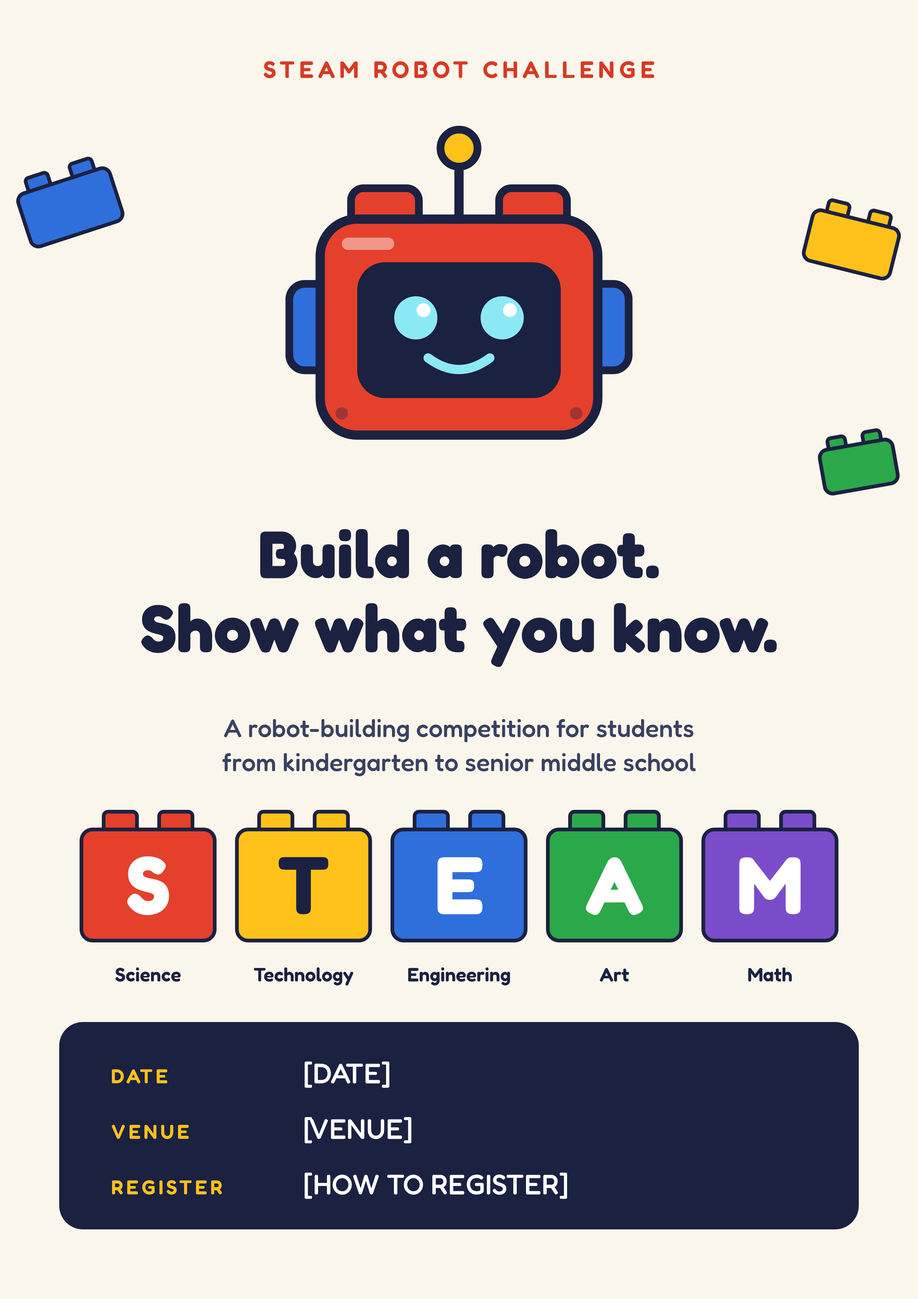
<style>
.page{position:relative;width:918px;height:1299px;background:#fbf6ec}
.page>*{position:absolute;margin:0}
.t1{font:23.7px "Fredoka-SemiBold";letter-spacing:0.188em;color:#d63a25}
.t2{font:66.6px/74px "Fredoka-Bold";color:#1b2140}
.t3{font:25.2px/34.1px "Fredoka-Medium";color:#3a4160}
.t4{font:81.4px "Fredoka-Bold";color:#ffffff}
.t5{font:81.4px "Fredoka-Bold";color:#1b2140}
.t6{font:19.3px "Fredoka-SemiBold";color:#1b2140}
.t7{font:28.1px "Fredoka-Medium";color:#ffffff}
.t8{font:20px "Fredoka-SemiBold";letter-spacing:0.148em;color:#ffc21a}
</style>
<div class="page">
<p class="t1" style="left:264px;top:61px;width:391px;height:17px">STEAM ROBOT CHALLENGE</p>
<p class="t2" style="left:141px;top:529px;width:636px;height:138px;text-align:center">Build a robot.<br>Show what you know.</p>
<p class="t3" style="left:223px;top:719px;width:473px;height:57px;text-align:center">A robot-building competition for students<br>from kindergarten to senior middle school</p>
<p class="t4" style="left:127px;top:856px;width:42px;height:59px">S</p>
<p class="t5" style="left:279px;top:857px;width:49px;height:57px">T</p>
<p class="t4" style="left:438px;top:857px;width:45px;height:57px">E</p>
<p class="t4" style="left:586px;top:857px;width:57px;height:58px">A</p>
<p class="t4" style="left:739px;top:857px;width:62px;height:57px">M</p>
<p class="t6" style="left:116px;top:967px;width:65px;height:14px">Science</p>
<p class="t6" style="left:254px;top:967px;width:100px;height:19px">Technology</p>
<p class="t6" style="left:408px;top:967px;width:102px;height:19px">Engineering</p>
<p class="t6" style="left:600px;top:968px;width:29px;height:13px">Art</p>
<p class="t6" style="left:748px;top:967px;width:44px;height:14px">Math</p>
<p class="t7" style="left:305px;top:1061px;width:84px;height:27px">[DATE]</p>
<p class="t8" style="left:112px;top:1069px;width:55px;height:14px">DATE</p>
<p class="t7" style="left:305px;top:1117px;width:107px;height:26px">[VENUE]</p>
<p class="t8" style="left:112px;top:1124px;width:77px;height:15px">VENUE</p>
<p class="t8" style="left:112px;top:1180px;width:110px;height:14px">REGISTER</p>
<p class="t7" style="left:305px;top:1172px;width:262px;height:27px">[HOW TO REGISTER]</p>
</div>
